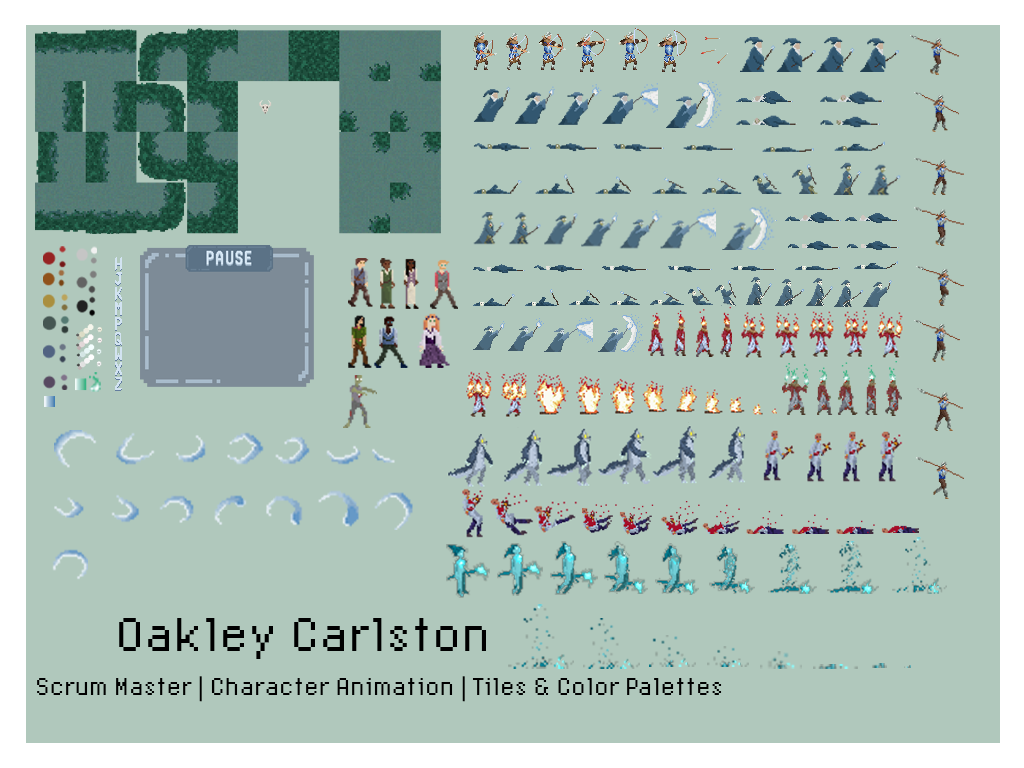
<style>
.page{position:relative;width:1024px;height:768px;background:#b0c8bc}
.page>*{position:absolute;margin:0}
.t1{font:50px "LoRes12OT-Regular";color:#000000}
.t2{font:25px "LoRes12OT-Regular";color:#000000}
</style>
<div class="page">
<p class="t1" style="left:119px;top:618px;width:367px;height:41px">Oakley Carlston</p>
<p class="t2" style="left:37px;top:676px;width:685px;height:26px">Scrum Master | Character Animation | Tiles &amp; Color Palettes</p>
</div>
